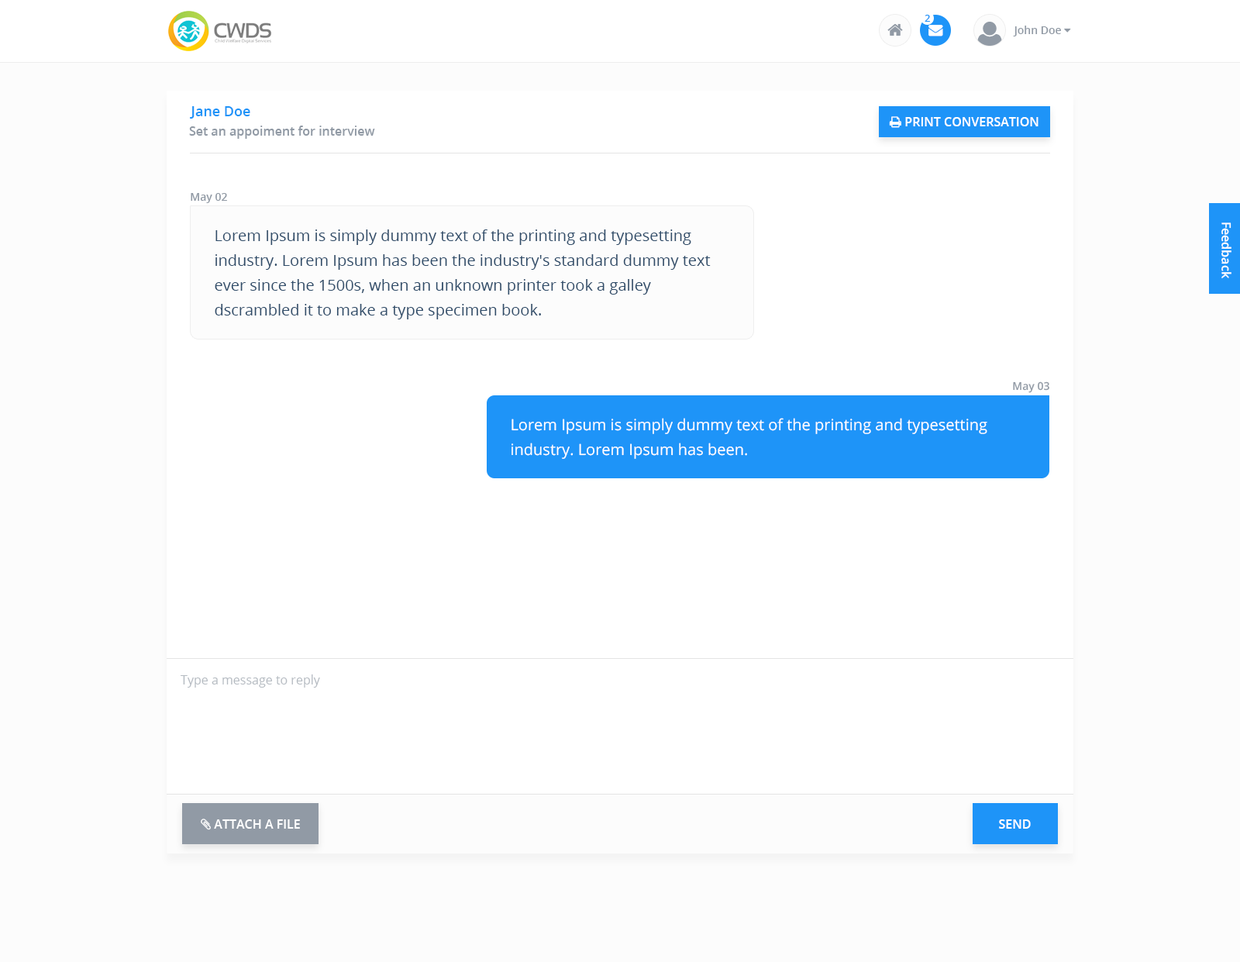
<style>
.page{position:relative;width:1240px;height:962px;background:#ffffff}
.page>*{position:absolute;margin:0}
.t1{font:9.8px "OpenSans-Semibold";color:#1e94f8}
.t2{font:13.9px "OpenSans-Semibold";color:#1e94f8}
.t3{font:12.4px "OpenSans-Semibold";color:#919aa5}
.t4{font:10.8px "OpenSans-Semibold";color:#919aa5}
.t5{font:15.5px/24.8px "OpenSans";color:#304d6a}
.t6{font:12.4px "OpenSans-Semibold";color:#ffffff}
.t7{font:10.9px "OpenSans-Semibold";color:#919aa5}
.t8{font:15.5px/24.8px "OpenSans";color:#ffffff}
.t9{font:12.4px "OpenSans";color:#b6bcc2}
.t10{font:12.4px "OpenSans-Semibold";color:#ffffff;text-transform:uppercase}
</style>
<div class="page">
<p class="t1" style="left:925px;top:15px;width:5px;height:7px">2</p>
<p class="t2" style="left:190px;top:106px;width:60px;height:13px">Jane Doe</p>
<p class="t3" style="left:189px;top:126px;width:186px;height:13px">Set an appoiment for interview</p>
<p class="t4" style="left:191px;top:193px;width:36px;height:10px">May 02</p>
<p class="t5" style="left:215px;top:229px;width:496px;height:90px">Lorem Ipsum is simply dummy text of the printing and typesetting industry. Lorem Ipsum has been the industry's standard dummy text ever since the 1500s, when an unknown printer took a galley <br>dscrambled it to make a type specimen book.</p>
<p class="t6" style="left:1221px;top:222px;width:10px;height:56px;rotate:90deg">Feedback</p>
<p class="t7" style="left:1013px;top:381px;width:36px;height:12px">May 03</p>
<p class="t8" style="left:511px;top:418px;width:476px;height:41px">Lorem Ipsum is simply dummy text of the printing and typesetting industry. Lorem Ipsum has been.</p>
<p class="t9" style="left:181px;top:674px;width:139px;height:13px">Type a message to reply</p>
<p class="t10" style="left:999px;top:819px;width:32px;height:9px">Send</p>
</div>
